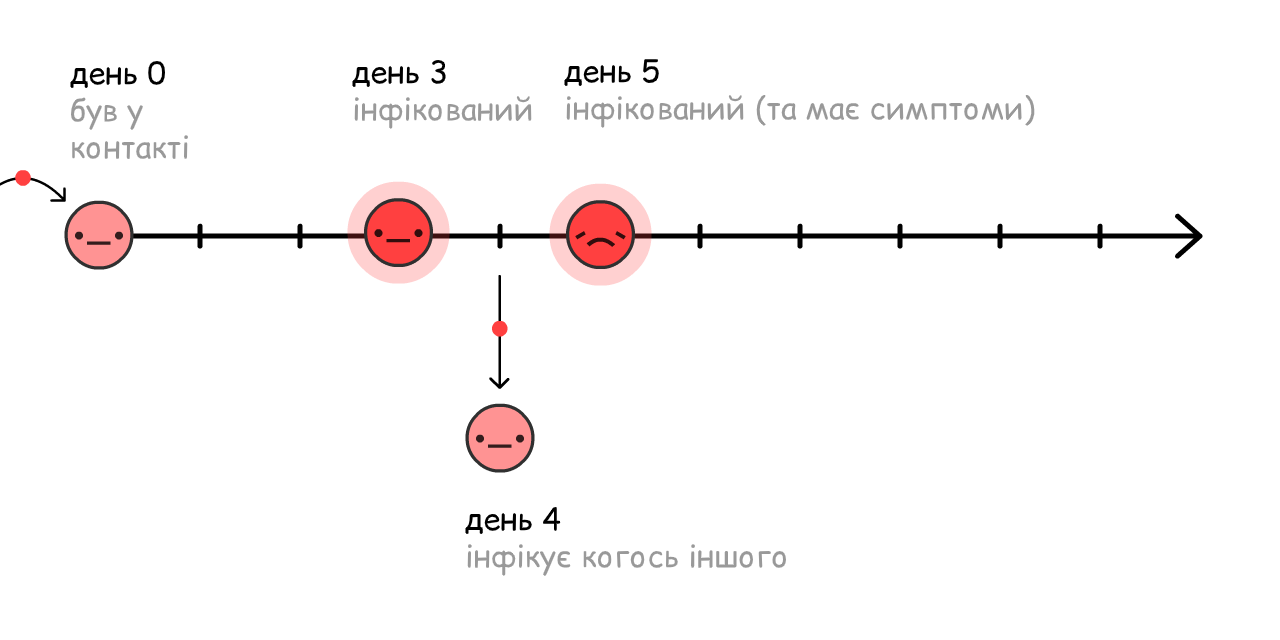
<style>
.page{position:relative;width:1280px;height:640px;background:#ffffff}
.page>*{position:absolute;margin:0}
.t1{font:31px "ComicRelief";color:#999999}
.t2{font:31px "ComicRelief";color:#000000}
</style>
<div class="page">
<p class="t1" style="left:70px;top:61px;width:118px;height:99px"><span class="t2">день 0<br></span>був у контакті</p>
<p class="t1" style="left:352px;top:59px;width:180px;height:70px"><span class="t2">день 3<br></span>інфікований</p>
<p class="t1" style="left:564px;top:59px;width:471px;height:69px"><span class="t2">день 5<br></span>інфікований (та має симптоми)</p>
<p class="t1" style="left:465px;top:507px;width:321px;height:70px"><span class="t2">день 4<br></span>інфікує когось іншого</p>
</div>
